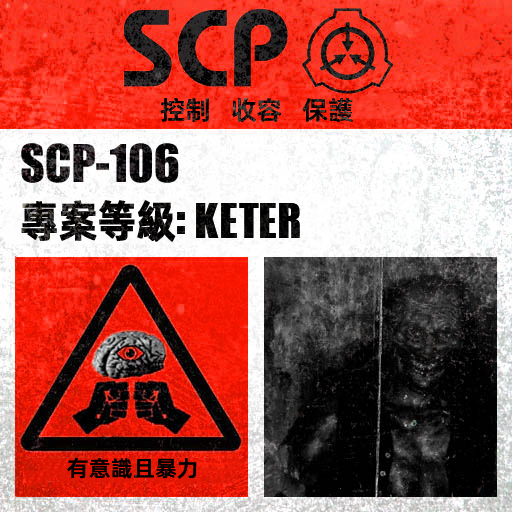
<style>
.page{position:relative;width:512px;height:512px}
.page>*{position:absolute;margin:0}
.t1{font:26px "AlibabaPuHuiTiM"}
.t2{font:52px "URWImpactW01-Bold";letter-spacing:0.02em;color:#000000}
.t3{font:44px "AlibabaPuHuiTiB";letter-spacing:-0.02em;color:#000000;font-weight:bold;scale:0.9 1}
.t4{font:62px "URWImpactW01-Bold";color:#000000}
.t5{font:22px "AlibabaPuHuiTiM";letter-spacing:0.02em;color:#000000}
</style>
<div class="page">
<p class="t1" style="left:160px;top:97px;width:193px;height:26px">控制   收容   保護</p>
<p class="t2" style="left:21px;top:200px;width:279px;height:42px"><span class="t3">專案等級</span><span class="t4">: </span>KETER</p>
<p class="t5" style="left:67px;top:458px;width:130px;height:21px">有意識且暴力</p>
</div>
